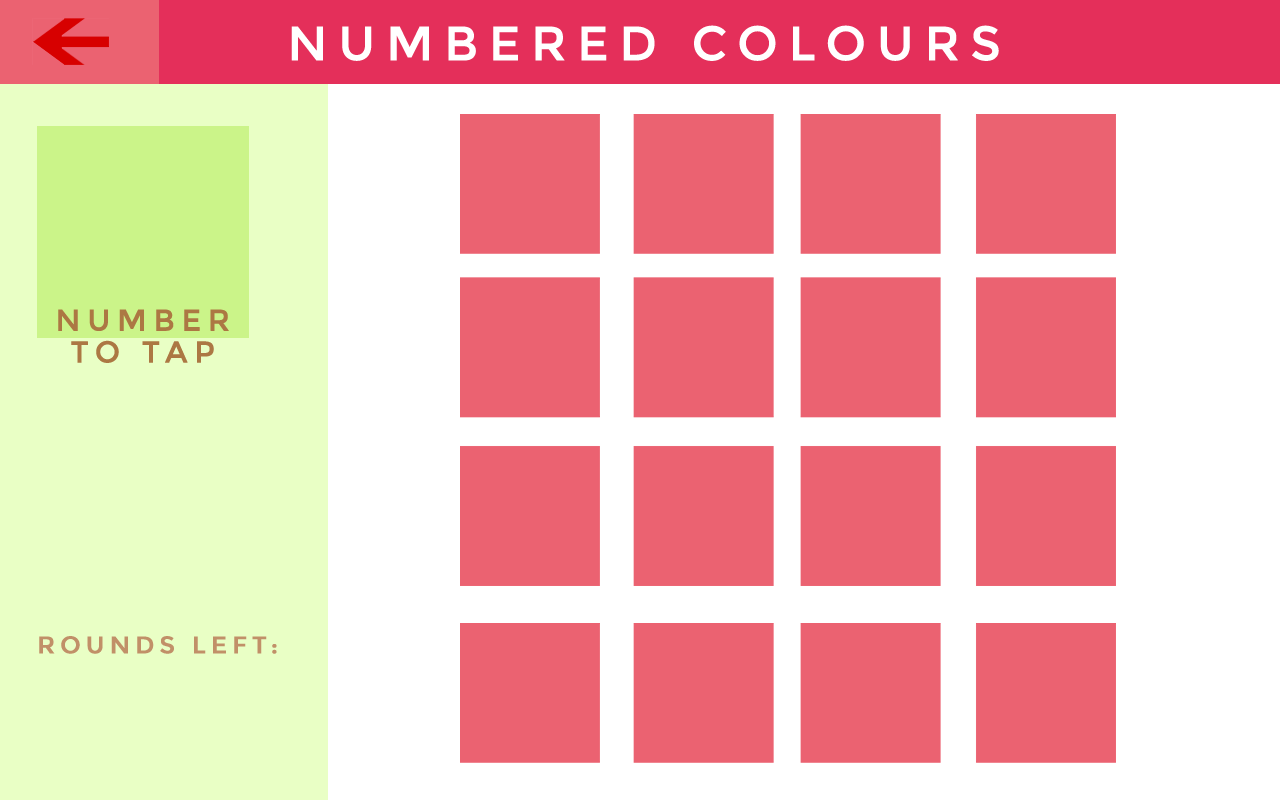
<style>
.page{position:relative;width:1280px;height:800px;background:#ffffff}
.page>*{position:absolute;margin:0}
.t1{font:48px "Montserrat-Regular";letter-spacing:0.2em;color:#ffffff;text-transform:uppercase;font-weight:bold}
.t2{font:30px/31.9px "Montserrat-Regular";letter-spacing:0.2em;color:#ac7843;text-transform:uppercase;font-weight:bold}
.t3{font:24px "Montserrat-Regular";letter-spacing:0.2em;color:#c19068;text-transform:uppercase;font-weight:bold}
</style>
<div class="page">
<p class="t1" style="left:291px;top:25px;width:708px;height:36px">Numbered Colours</p>
<p class="t2" style="left:58px;top:309px;width:171px;height:54px;text-align:center">Number <br>to tap</p>
<p class="t3" style="left:39px;top:636px;width:238px;height:18px">Rounds left:</p>
</div>
